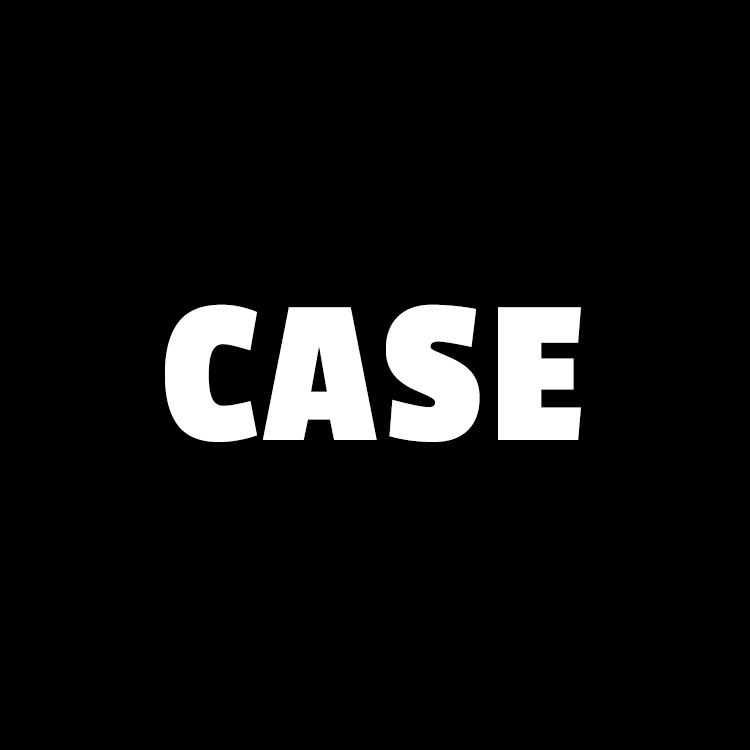
<style>
.page{position:relative;width:750px;height:750px;background:#000000}
.page>*{position:absolute;margin:0}
.t1{font:213.8px "PassionOne-Bold";letter-spacing:0.04em;color:#ffffff;scale:0.94 1}
</style>
<div class="page">
<p class="t1" style="left:165px;top:304px;width:416px;height:138px">CASE</p>
</div>
